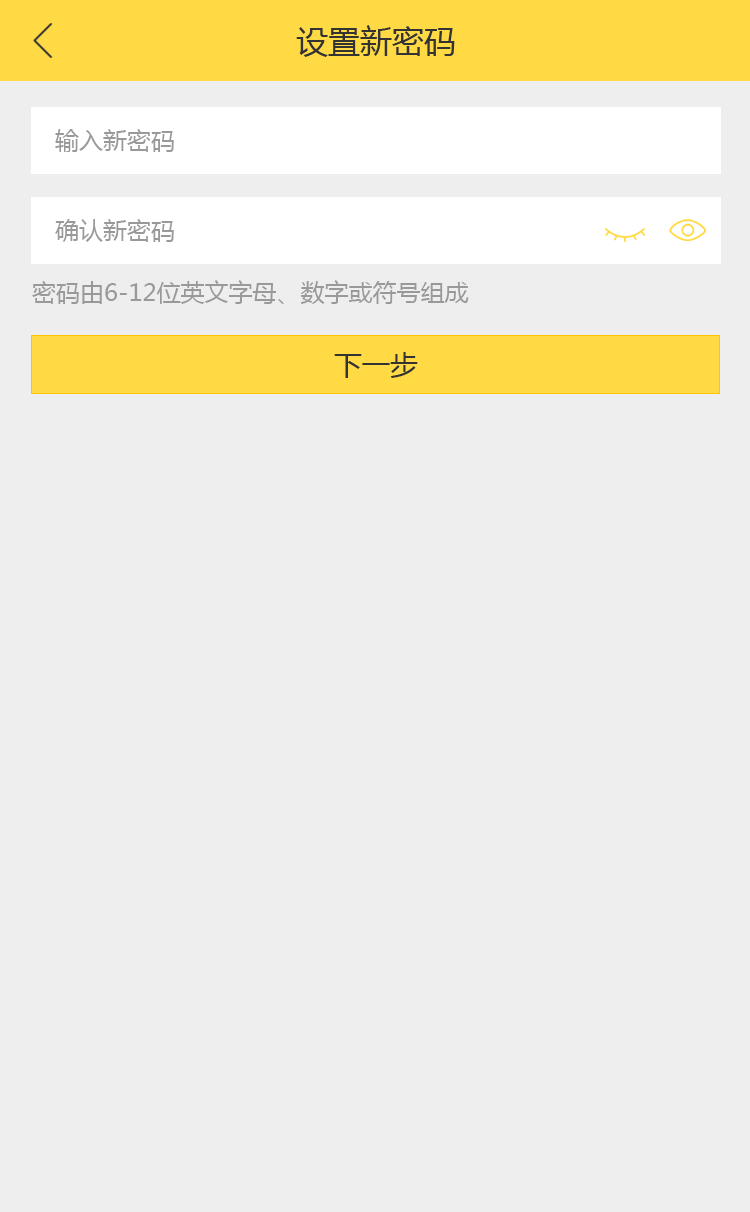
<style>
.page{position:relative;width:750px;height:1212px;background:#eeeeee}
.page>*{position:absolute;margin:0}
.t1{font:32px "MicrosoftYaHei";color:#333333}
.t2{font:24px "MicrosoftYaHei";color:#999999}
.t3{font:28px "MicrosoftYaHei";color:#333333}
</style>
<div class="page">
<p class="t1" style="left:296px;top:25px;width:159px;height:32px">设置新密码</p>
<p class="t2" style="left:55px;top:129px;width:119px;height:23px">输入新密码</p>
<p class="t2" style="left:55px;top:219px;width:119px;height:23px">确认新密码</p>
<p class="t2" style="left:32px;top:280px;width:437px;height:24px">密码由6-12位英文字母、数字或符号组成</p>
<p class="t3" style="left:334px;top:352px;width:84px;height:26px">下一步</p>
</div>
